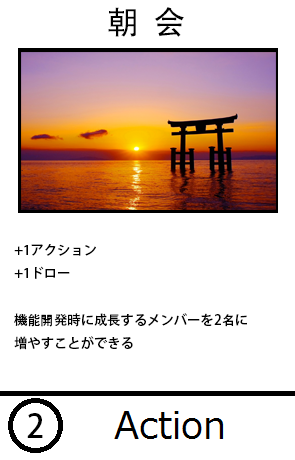
<style>
.page{position:relative;width:295px;height:460px;background:#ffffff}
.page>*{position:absolute;margin:0}
.t1{font:32px "AdobeHeitiStd-Regular";color:#000000}
.t2{font:13.3px "AdobeHeitiStd-Regular";color:#000000}
</style>
<div class="page">
<p class="t1" style="left:108px;top:7px;width:76px;height:30px">朝  会</p>
<p class="t2" style="left:14px;top:244px;width:233px;height:106px">+1アクション<br>+1ドロー<br><br>機能開発時に成長するメンバーを2名に<br>増やすことができる</p>
<p class="t1" style="left:27px;top:413px;width:16px;height:25px">2</p>
</div>
